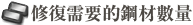
<style>
.page{position:relative;width:193px;height:25px;background:#ffffff}
.page>*{position:absolute;margin:0}
.t1{font:18px "RyuminPr6N-ExBold";color:#4c4843}
</style>
<div class="page">
<p class="t1" style="left:31px;top:4px;width:161px;height:18px">修復需要的鋼材數量</p>
</div>
